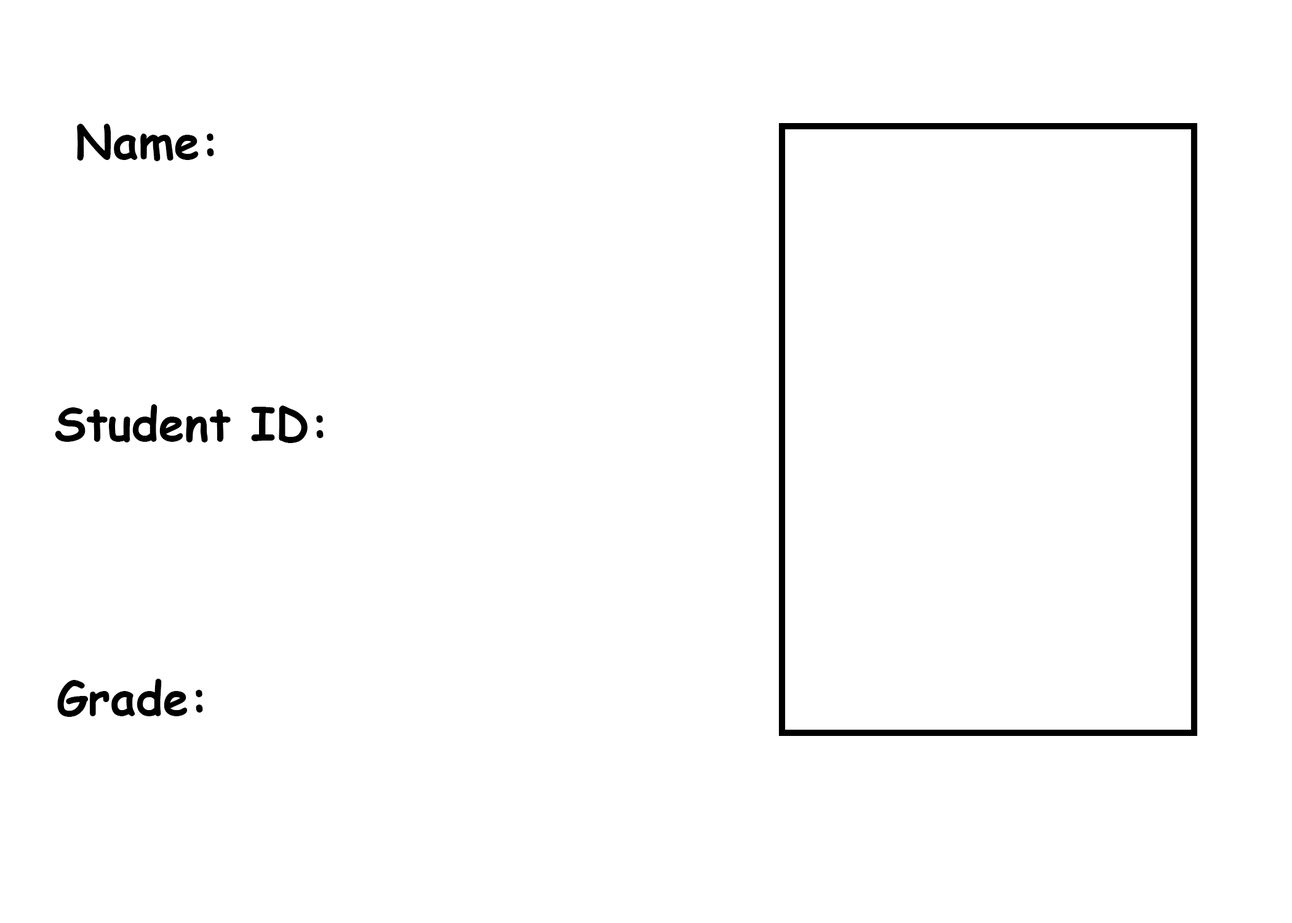
<style>
.page{position:relative;width:1292px;height:923px;background:#ffffff}
.page>*{position:absolute;margin:0}
.t1{font:46.1px "ComicSansMS-Bold";color:#000000}
</style>
<div class="page">
<p class="t1" style="left:77px;top:124px;width:137px;height:37px">Name:</p>
<p class="t1" style="left:55px;top:404px;width:269px;height:39px">Student ID:</p>
<p class="t1" style="left:57px;top:679px;width:146px;height:38px">Grade:</p>
</div>
